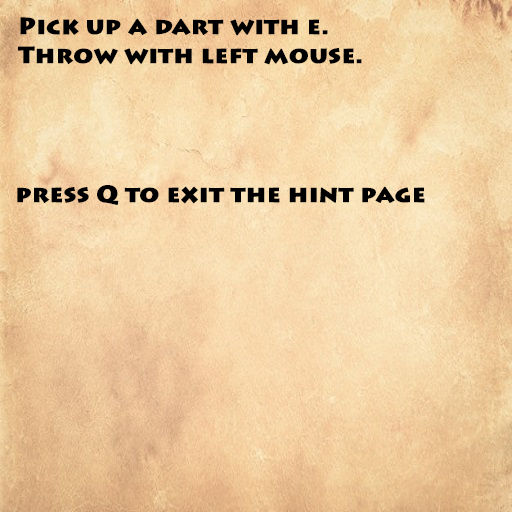
<style>
.page{position:relative;width:512px;height:512px}
.page>*{position:absolute;margin:0}
.t1{font:24px "LithosPro-Black";color:#000000;font-weight:bold}
</style>
<div class="page">
<p class="t1" style="left:18px;top:17px;width:344px;height:48px">Pick up a dart with e. <br>Throw with left mouse.</p>
<p class="t1" style="left:17px;top:185px;width:408px;height:20px">press Q to exit the hint page</p>
</div>
